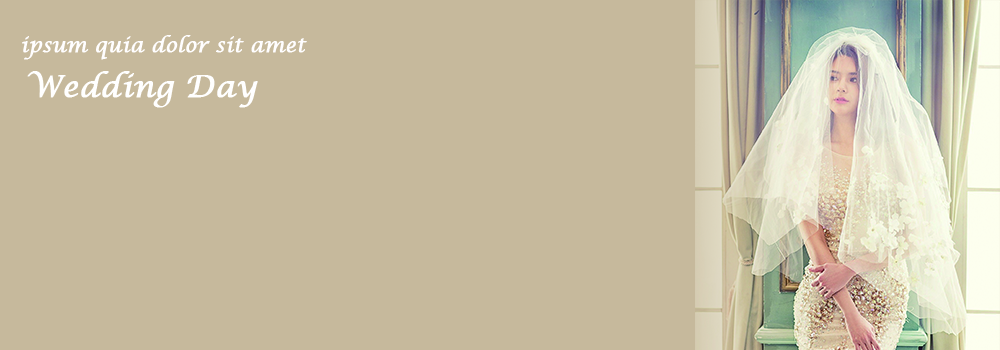
<style>
.page{position:relative;width:1000px;height:350px;background:#c6b99c}
.page>*{position:absolute;margin:0}
.t1{font:20px "LucidaCalligraphy-Italic";color:#fffeff;font-weight:bold}
.t2{font:30px "LucidaCalligraphy-Italic";color:#ffffff;font-weight:bold}
</style>
<div class="page">
<p class="t1" style="left:22px;top:35px;width:285px;height:25px">ipsum quia dolor sit amet</p>
<p class="t2" style="left:27px;top:71px;width:231px;height:37px">Wedding Day</p>
</div>
